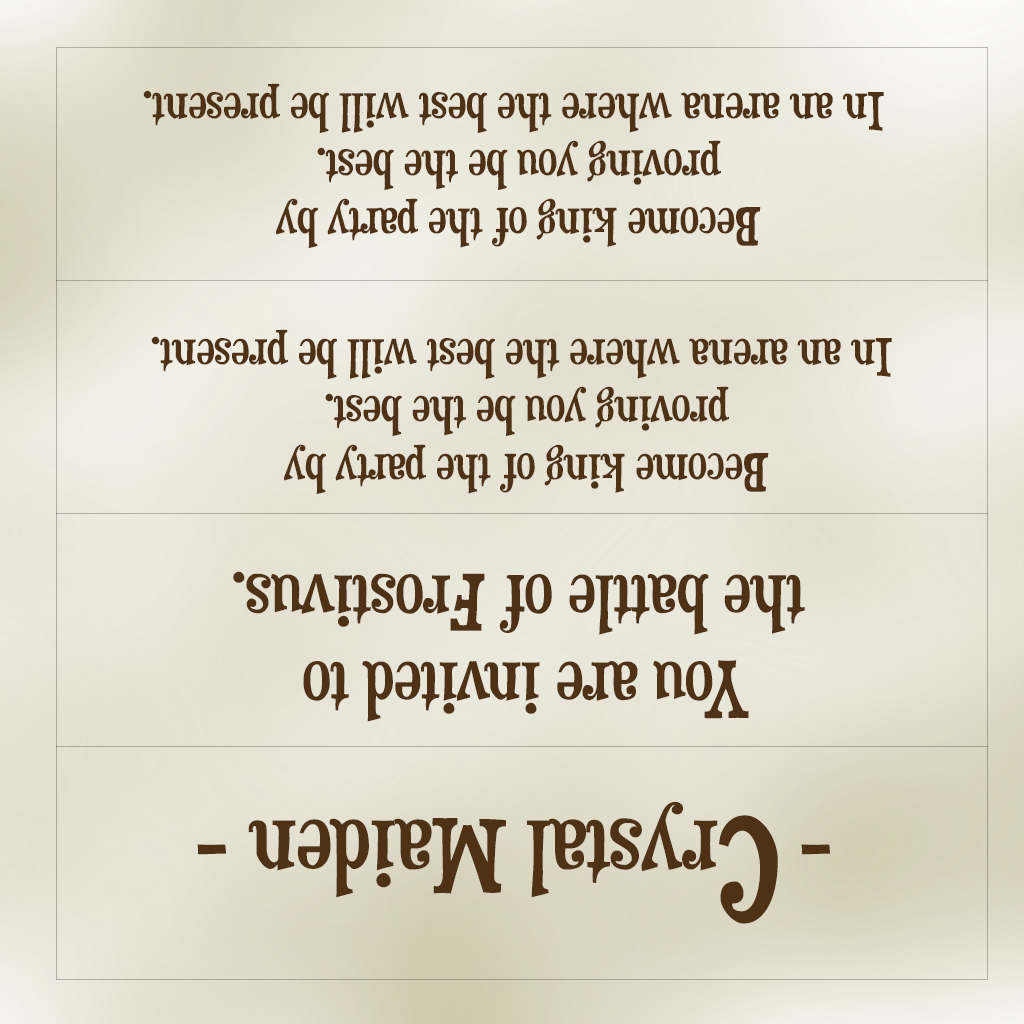
<style>
.page{position:relative;width:1024px;height:1024px}
.page>*{position:absolute;margin:0}
.t1{font:48px "Duality-Regular";letter-spacing:-0.005em;color:#4f3116}
.t2{font:72px "Duality-Regular";letter-spacing:-0.005em;color:#4f3116}
.t3{font:93.5px "Duality-Regular";letter-spacing:-0.005em;color:#4f3116}
.t4{font:129.8px "Duality-Regular";letter-spacing:-0.005em;color:#4f3116}
</style>
<div class="page">
<p class="t1" style="left:143px;top:83px;width:741px;height:166px;text-align:center;rotate:-180deg">Become king of the party by <br>proving you be the best. <br>In an arena where the best will be present.</p>
<p class="t1" style="left:151px;top:329px;width:741px;height:166px;text-align:center;rotate:-180deg">Become king of the party by <br>proving you be the best. <br>In an arena where the best will be present.</p>
<p class="t2" style="left:233px;top:571px;width:572px;height:151px;text-align:center;rotate:-180deg">You are invited to <br>the battle of Frostivus.</p>
<p class="t3" style="left:197px;top:801px;width:633px;height:123px;rotate:-180deg">- <span class="t4">C</span>rystal Maiden -</p>
</div>
